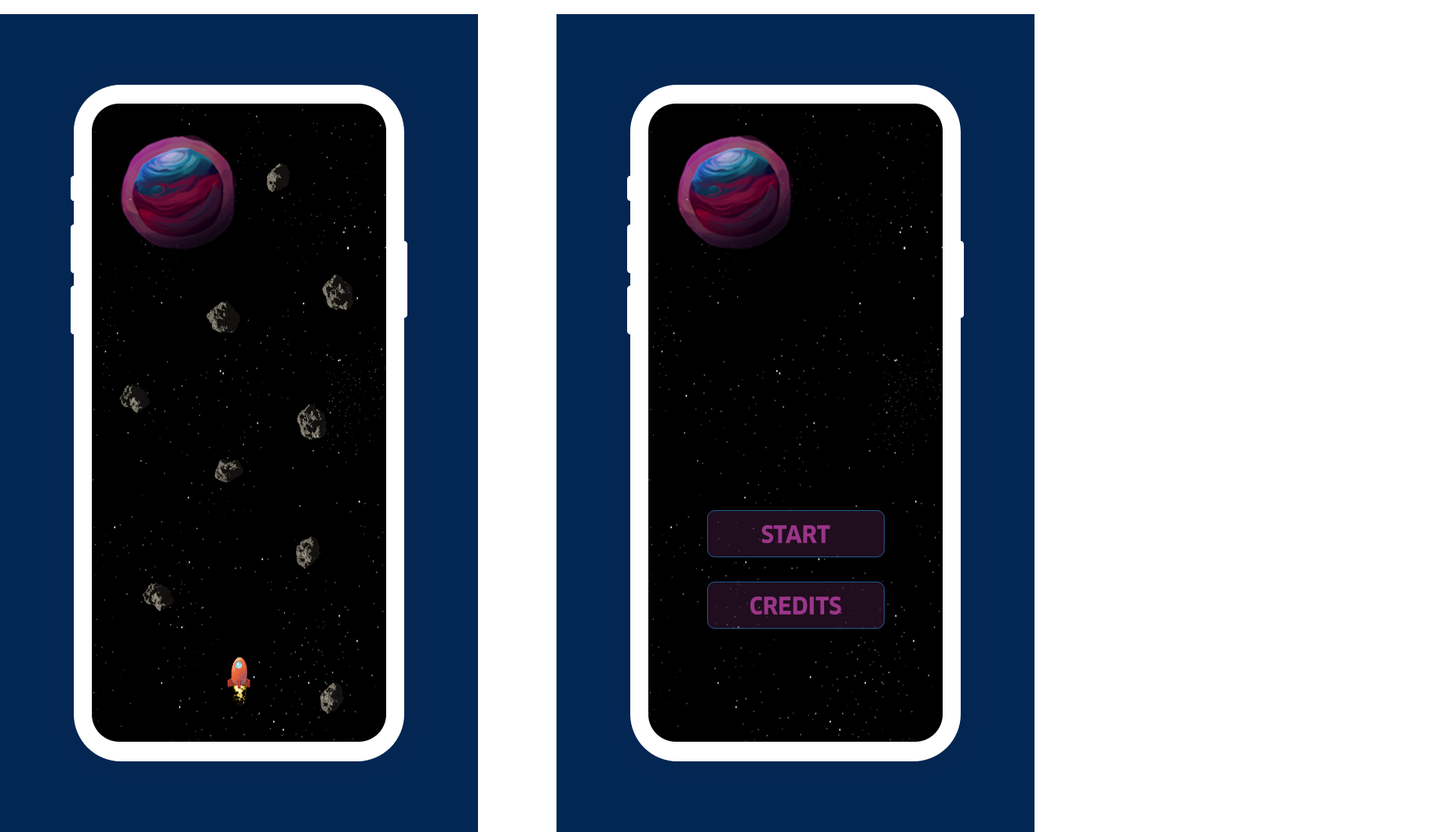
<style>
.page{position:relative;width:1434px;height:832px;background:#ffffff}
.page>*{position:absolute;margin:0}
.t1{font:23.5px "Clan-Bold";color:#993689;text-transform:uppercase;scale:0.95 1}
</style>
<div class="page">
<p class="t1" style="left:761px;top:525px;width:69px;height:18px">START</p>
<p class="t1" style="left:750px;top:596px;width:91px;height:18px">CREDITS</p>
</div>
